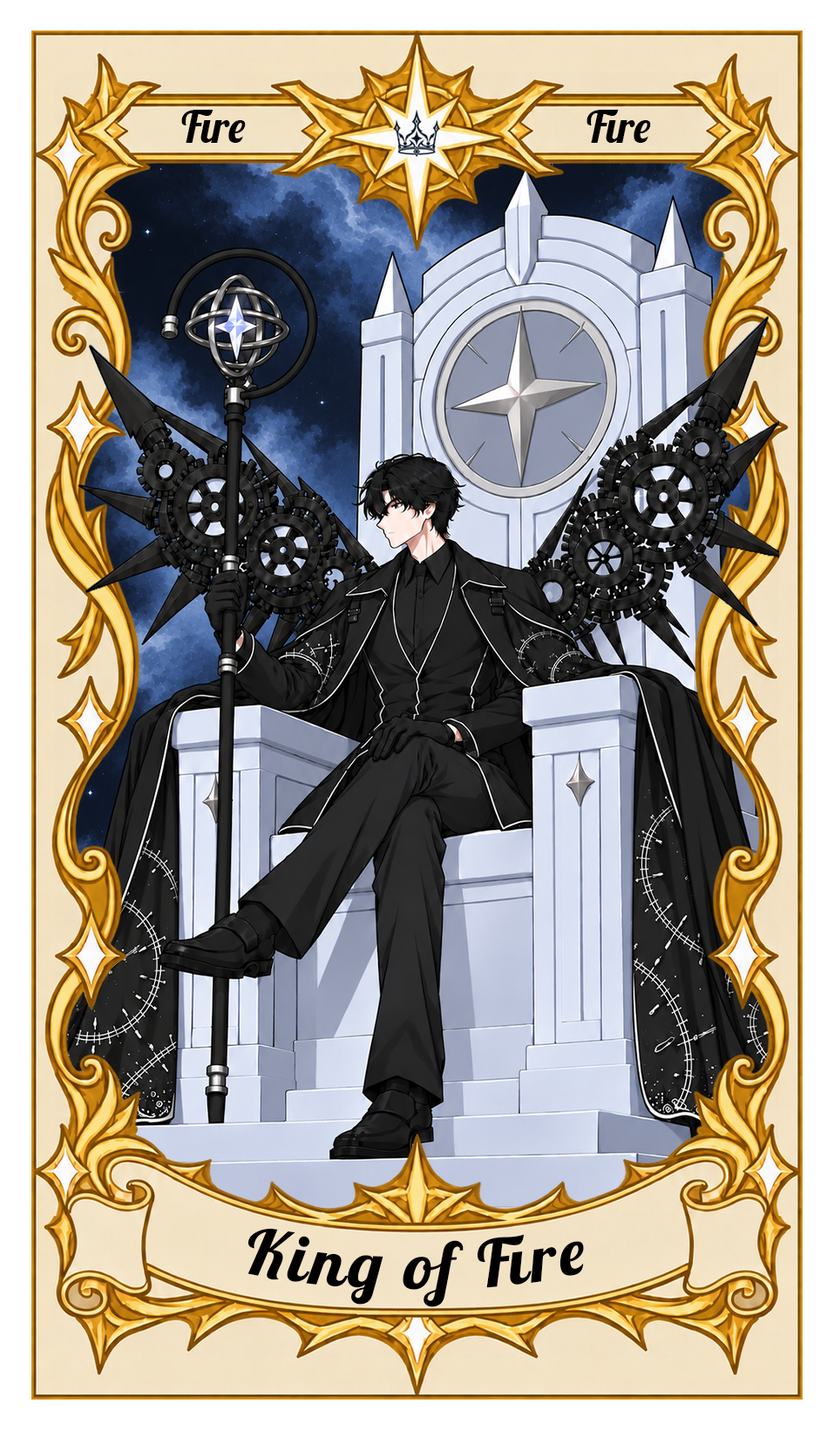
<style>
.page{position:relative;width:834px;height:1430px}
.page>*{position:absolute;margin:0}
.t1{font:43.6px "Lobster-Regular";color:#000000}
.t2{font:65.3px "Lobster-Regular";letter-spacing:0.05em;color:#000000}
</style>
<div class="page">
<p class="t1" style="left:181px;top:110px;width:65px;height:33px">Fire</p>
<p class="t1" style="left:586px;top:110px;width:65px;height:33px">Fire</p>
<p class="t2" style="left:247px;top:1228px;width:337px;height:80px">King of Fire</p>
</div>
